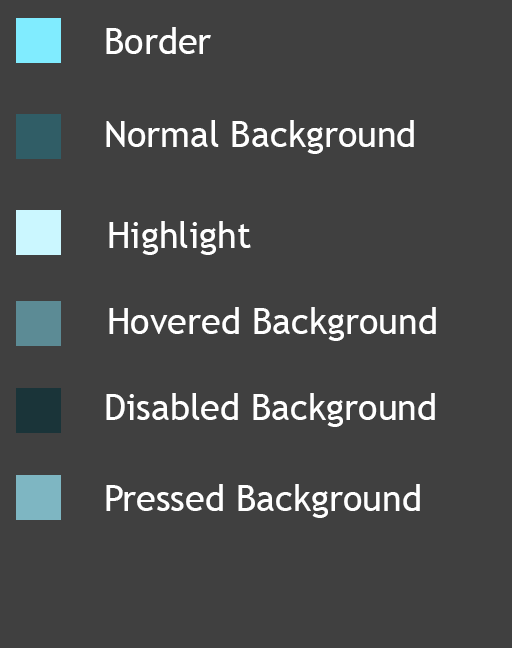
<style>
.page{position:relative;width:512px;height:648px;background:#404040}
.page>*{position:absolute;margin:0}
.t1{font:36px "TrebuchetMS";color:#ffffff}
</style>
<div class="page">
<p class="t1" style="left:106px;top:27px;width:105px;height:27px">Border</p>
<p class="t1" style="left:106px;top:120px;width:308px;height:34px">Normal Background</p>
<p class="t1" style="left:109px;top:221px;width:142px;height:34px">Highlight</p>
<p class="t1" style="left:109px;top:307px;width:327px;height:34px">Hovered Background</p>
<p class="t1" style="left:106px;top:393px;width:329px;height:34px">Disabled Background</p>
<p class="t1" style="left:106px;top:484px;width:314px;height:34px">Pressed Background</p>
</div>
